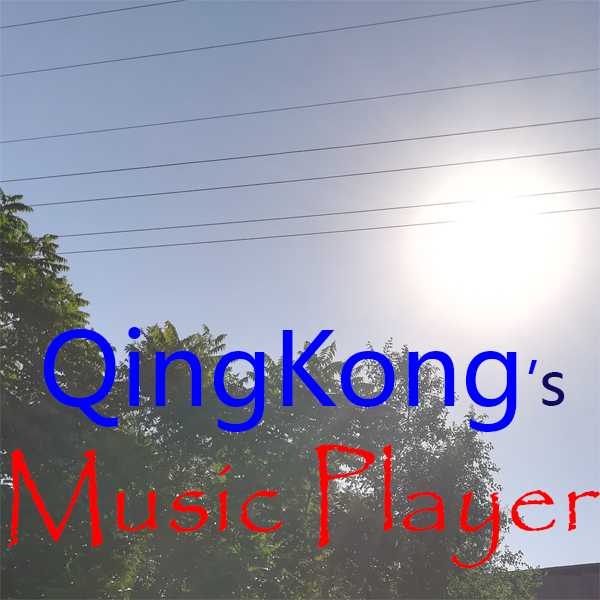
<style>
.page{position:relative;width:600px;height:600px}
.page>*{position:absolute;margin:0}
.t1{font:100px "MicrosoftYaHei";color:#0000ff}
.t2{font:60px "MicrosoftYaHei";color:#0000ff}
.t3{font:60px "MicrosoftYaHei";color:#100964}
.t4{font:105px "Papyrus-Regular";color:#ff0000}
</style>
<div class="page">
<p class="t1" style="left:43px;top:327px;width:494px;height:105px">QingKong<span class="t2">’</span></p>
<p class="t3" style="left:542px;top:372px;width:23px;height:34px">s</p>
<p class="t4" style="left:7px;top:444px;width:593px;height:125px">Music Player</p>
</div>
